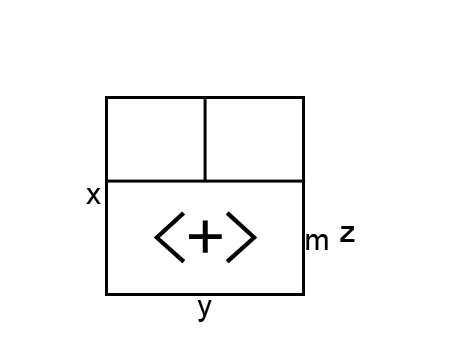
<style>
.page{position:relative;width:454px;height:340px;background:#ffffff}
.page>*{position:absolute;margin:0}
.t1{font:30px "ArialMT";color:#000000}
.t2{font:72px "SimHei";color:#000000}
</style>
<div class="page">
<p class="t1" style="left:86px;top:188px;width:15px;height:16px">x</p>
<p class="t2" style="left:154px;top:211px;width:103px;height:53px">&lt;+&gt;</p>
<p class="t1" style="left:340px;top:226px;width:15px;height:16px">z</p>
<p class="t1" style="left:306px;top:234px;width:22px;height:16px">m</p>
<p class="t1" style="left:197px;top:300px;width:15px;height:22px">y</p>
</div>
